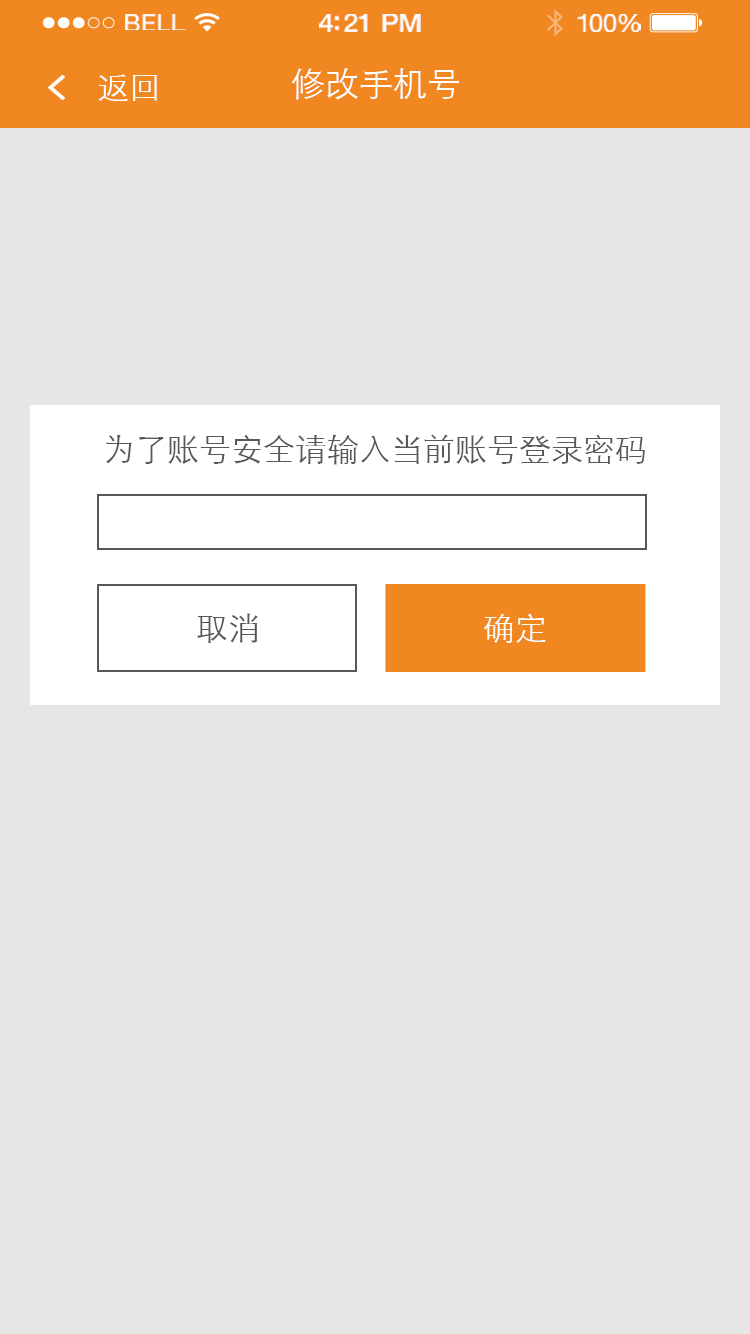
<style>
.page{position:relative;width:750px;height:1334px;background:#e6e6e6}
.page>*{position:absolute;margin:0}
.t1{font:23.3px "HelveticaNeue";letter-spacing:0.02em;color:#ffffff;scale:1.06 1}
.t2{font:25.3px "HelveticaNeue-Medium";letter-spacing:-0.02em;color:#ffffff;scale:1.06 1}
.t3{font:24.3px "HelveticaNeue";letter-spacing:-0.02em;color:#ffffff;scale:1.06 1}
.t4{font:32px "STXihei";color:#ffffff}
.t5{font:34px "STXihei";color:#ffffff}
.t6{font:32px "STXihei";color:#595757}
</style>
<div class="page">
<p class="t1" style="left:125px;top:14px;width:61px;height:16px">BELL</p>
<p class="t2" style="left:319px;top:14px;width:102px;height:18px">4:21 PM</p>
<p class="t3" style="left:577px;top:14px;width:64px;height:18px">100%</p>
<p class="t4" style="left:98px;top:74px;width:59px;height:27px">返回</p>
<p class="t5" style="left:291px;top:68px;width:168px;height:32px">修改手机号</p>
<p class="t6" style="left:106px;top:434px;width:539px;height:31px">为了账号安全请输入当前账号登录密码</p>
<p class="t6" style="left:197px;top:613px;width:61px;height:30px">取消</p>
<p class="t4" style="left:483px;top:613px;width:63px;height:30px">确定</p>
</div>
